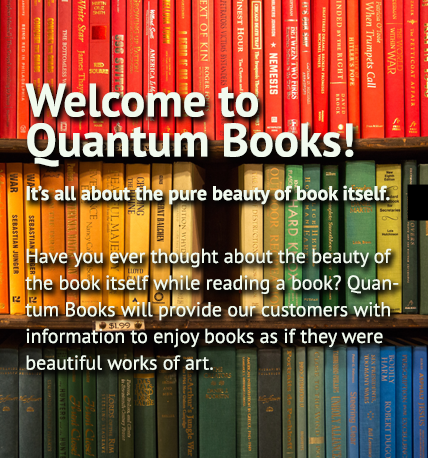
<style>
.page{position:relative;width:428px;height:458px}
.page>*{position:absolute;margin:0}
.t1{font:46.7px/40px "PTSans-Bold";color:#f1faee}
.t2{font:20px "PTSans-Bold";color:#f1faee}
.t3{font:20px/26.7px "PTSans-Regular";color:#f1faee}
</style>
<div class="page">
<p class="t1" style="left:25px;top:83px;width:329px;height:84px">Welcome to <br>Quantum Books!</p>
<p class="t2" style="left:26px;top:185px;width:364px;height:20px">It’s all about the pure beauty of book itself.</p>
<p class="t3" style="left:25px;top:248px;width:374px;height:122px">Have you ever thought about the beauty of the book itself while reading a book? Quantum Books will provide our customers with information to enjoy books as if they were beautiful works of art.</p>
</div>
